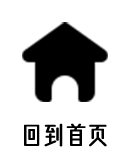
<style>
.page{position:relative;width:130px;height:164px;background:#ffffff}
.page>*{position:absolute;margin:0}
.t1{font:24px "WenCang-Regular";letter-spacing:0.05em;color:#000000;font-weight:bold}
</style>
<div class="page">
<p class="t1" style="left:24px;top:123px;width:83px;height:24px">回到首页</p>
</div>
